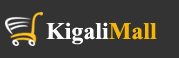
<style>
.page{position:relative;width:179px;height:58px;background:#333333}
.page>*{position:absolute;margin:0}
.t1{font:24px "TimesNewRomanPS-BoldMT";color:#fcfcfc}
.t2{font:24px "TimesNewRomanPS-BoldMT";color:#f6b608}
</style>
<div class="page">
<p class="t1" style="left:46px;top:22px;width:111px;height:23px">Kigali<span class="t2">Mall</span></p>
</div>
